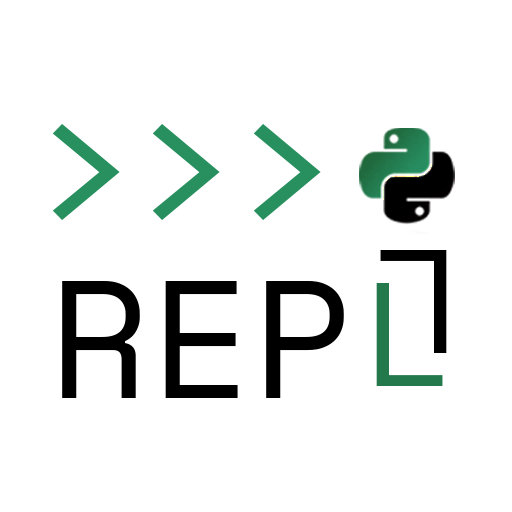
<style>
.page{position:relative;width:512px;height:512px;background:#ffffff}
.page>*{position:absolute;margin:0}
.t1{font:175px "Consolas";letter-spacing:0.025em;color:#27905e}
.t2{font:145.8px "SpaceMono-Regular";color:#000000}
.t3{font:166.7px "SpaceMono-Regular";color:#000000}
.t4{font:145.8px "SpaceMono-Regular";color:#23794c}
</style>
<div class="page">
<p class="t1" style="left:52px;top:124px;width:269px;height:96px">&gt;&gt;&gt;</p>
<p class="t2" style="left:380px;top:250px;width:67px;height:103px;rotate:180deg">L</p>
<p class="t3" style="left:62px;top:281px;width:282px;height:117px">REP</p>
<p class="t4" style="left:376px;top:283px;width:67px;height:103px">L</p>
</div>
